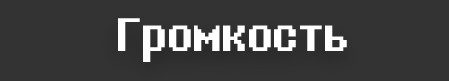
<style>
.page{position:relative;width:449px;height:81px;background:#333333}
.page>*{position:absolute;margin:0}
.t1{font:58.3px "Determination2";color:#ffffff}
</style>
<div class="page">
<p class="t1" style="left:118px;top:18px;width:229px;height:44px">Громкость</p>
</div>
